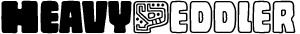
<style>
.page{position:relative;width:300px;height:34px;background:#ffffff}
.page>*{position:absolute;margin:0}
.t1{font:42.6px "CopalStd-Decorated";letter-spacing:0.01em;color:#000000}
.t2{font:42.6px "CopalStd-Solid";letter-spacing:0.01em;color:#000000}
</style>
<div class="page">
<p class="t1" style="left:1px;top:0px;width:295px;height:34px"><span class="t2">Heavy</span>Peddler</p>
</div>
